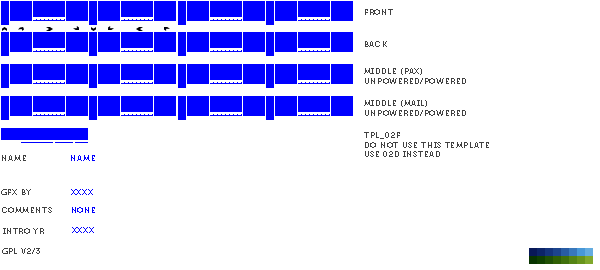
<style>
.page{position:relative;width:600px;height:270px;background:#ffffff}
.page>*{position:absolute;margin:0}
.t1{font:8px "Museo700-Regular";letter-spacing:0.075em;color:#404040;text-transform:uppercase}
.t2{font:8px "Museo700-Regular";letter-spacing:0.075em;color:#0000ff;text-transform:uppercase}
</style>
<div class="page">
<p class="t1" style="left:365px;top:9px;width:28px;height:6px">front</p>
<p class="t1" style="left:365px;top:41px;width:22px;height:6px">back</p>
<p class="t1" style="left:364px;top:68px;width:102px;height:16px">middle (pax)<br>unpowered/powered</p>
<p class="t1" style="left:364px;top:100px;width:102px;height:16px">middle (mail)<br>unpowered/powered</p>
<p class="t1" style="left:364px;top:132px;width:125px;height:25px">tpl_02f<br>do not use this template<br>use 02d instead</p>
<p class="t1" style="left:2px;top:155px;width:24px;height:6px">name</p>
<p class="t2" style="left:71px;top:155px;width:24px;height:6px">name</p>
<p class="t1" style="left:1px;top:189px;width:30px;height:6px">gfx by</p>
<p class="t2" style="left:71px;top:189px;width:22px;height:6px">xxxx</p>
<p class="t1" style="left:2px;top:207px;width:50px;height:6px">comments</p>
<p class="t2" style="left:72px;top:207px;width:23px;height:6px">none</p>
<p class="t1" style="left:3px;top:228px;width:41px;height:6px">intro yr</p>
<p class="t2" style="left:72px;top:227px;width:22px;height:6px">xxxx</p>
<p class="t1" style="left:2px;top:248px;width:38px;height:6px">gpl v2/3</p>
</div>
